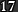
<style>
.page{position:relative;width:18px;height:12px;background:#333333}
.page>*{position:absolute;margin:0}
.t1{font:17px "Perpetua-Bold";color:#ffffff}
</style>
<div class="page">
<p class="t1" style="left:1px;top:1px;width:14px;height:10px">17</p>
</div>
